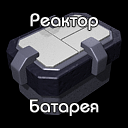
<style>
.page{position:relative;width:128px;height:128px;background:#000000}
.page>*{position:absolute;margin:0}
.t1{font:18px "BauhausC-Medium";color:#ffffff;font-weight:bold}
</style>
<div class="page">
<p class="t1" style="left:30px;top:13px;width:68px;height:17px">Реактор</p>
<p class="t1" style="left:30px;top:99px;width:69px;height:17px">Батарея</p>
</div>
